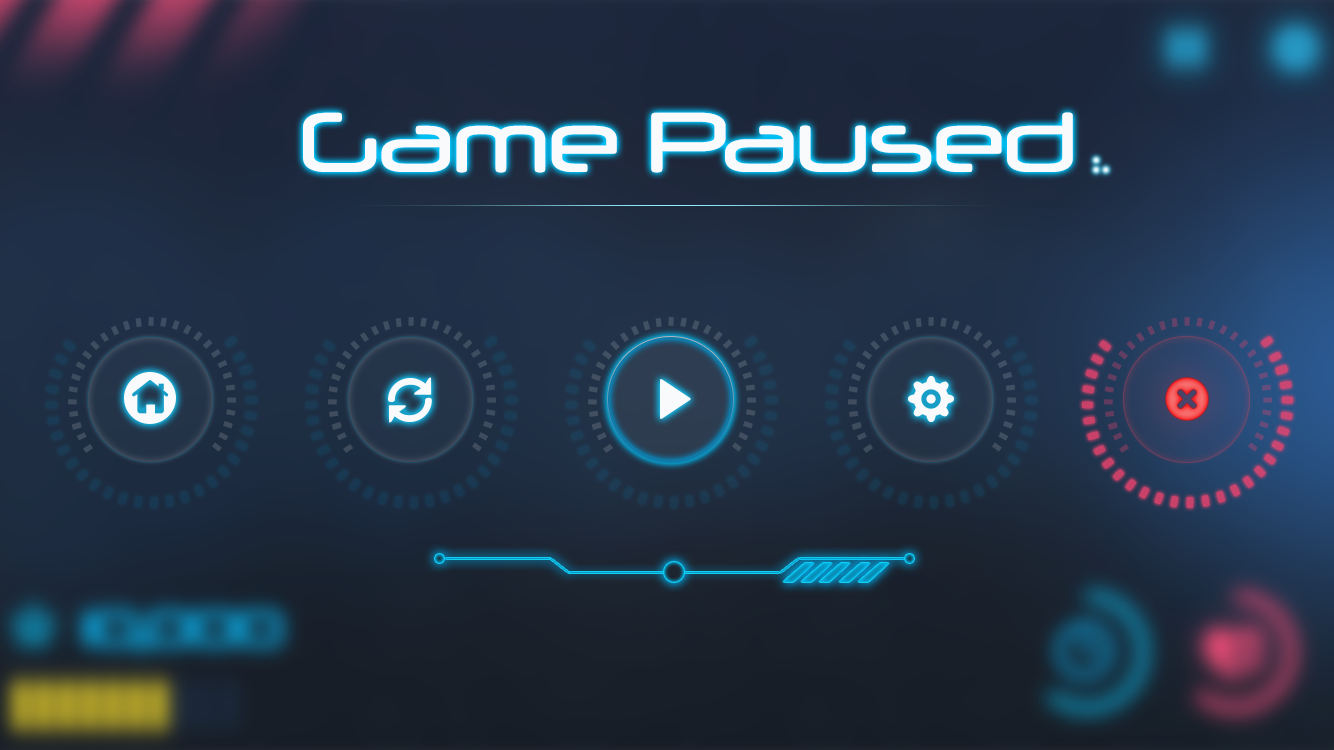
<style>
.page{position:relative;width:1334px;height:750px}
.page>*{position:absolute;margin:0}
.t1{font:81.5px "Neuropol-Regular";color:#f7fafb}
</style>
<div class="page">
<p class="t1" style="left:303px;top:112px;width:770px;height:61px">Game Paused</p>
</div>
